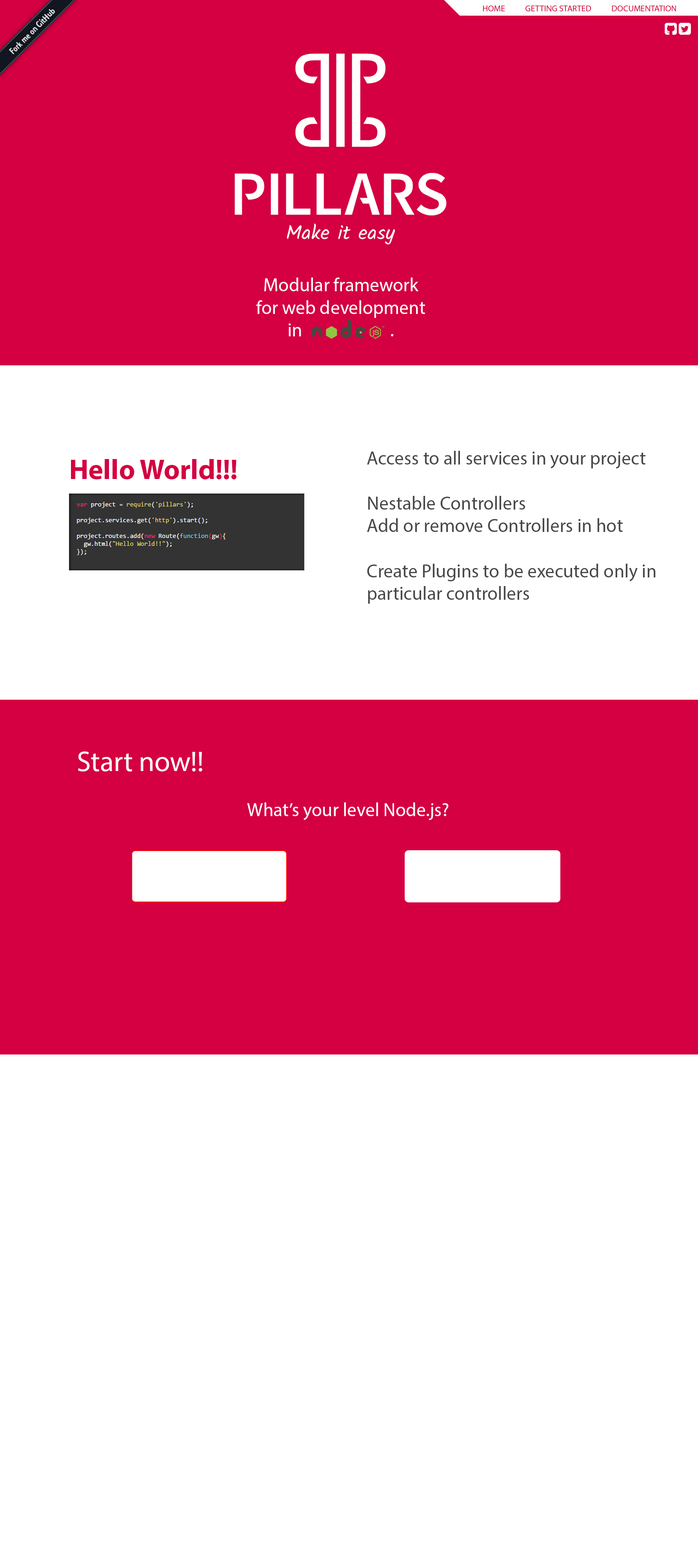
<style>
.page{position:relative;width:698px;height:1568px;background:#ffffff}
.page>*{position:absolute;margin:0}
.t1{font:8.6px "MyriadPro-Regular";color:#d40041}
.t2{font:18.8px "MyriadPro-Regular";color:#ffffff}
.t3{font:28.2px "MyriadPro-Bold";color:#d40041}
.t4{font:18.8px "MyriadPro-Regular";color:#484848}
.t5{font:28.2px "MyriadPro-Regular";color:#ffffff}
</style>
<div class="page">
<p class="t1" style="left:483px;top:5px;width:193px;height:6px">HOME           GETTING STARTED           DOCUMENTATION</p>
<p class="t2" style="left:256px;top:278px;width:169px;height:58px;text-align:center">Modular framework <br>for web development <br>in                      .</p>
<p class="t3" style="left:71px;top:459px;width:165px;height:20px">Hello World!!!</p>
<p class="t4" style="left:367px;top:451px;width:288px;height:153px">Access to all services in your project<br><br>Nestable Controllers<br>Add or remove Controllers in hot<br><br>Create Plugins to be executed only in particular controllers</p>
<p class="t5" style="left:78px;top:751px;width:124px;height:20px">Start now!!</p>
<p class="t2" style="left:247px;top:802px;width:201px;height:18px">What’s your level Node.js?</p>
</div>
